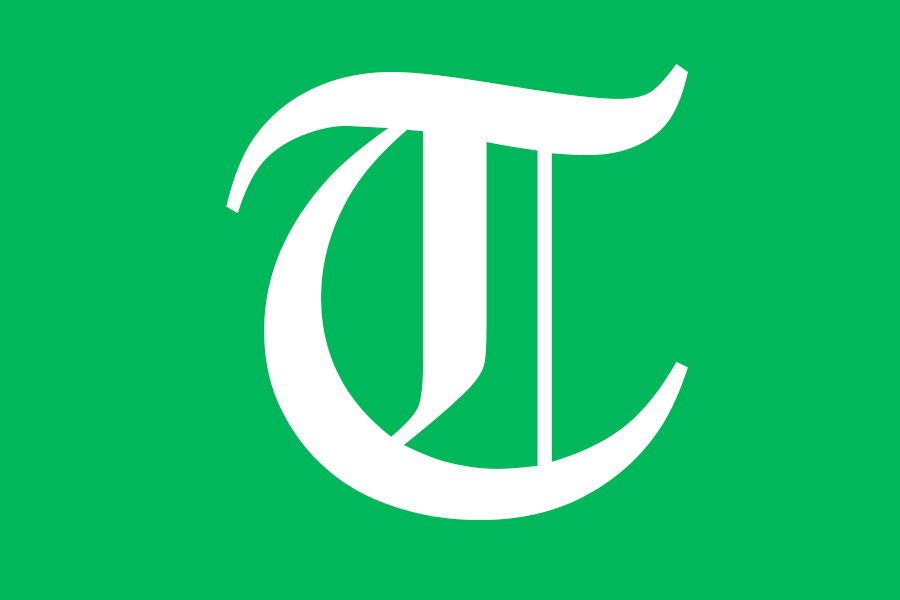
<style>
.page{position:relative;width:900px;height:600px;background:#00b85b}
.page>*{position:absolute;margin:0}
.t1{font:625px "OldEnglishTextMT";color:#ffffff}
</style>
<div class="page">
<p class="t1" style="left:226px;top:64px;width:462px;height:456px">T</p>
</div>
